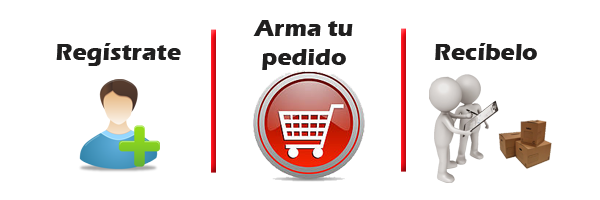
<style>
.page{position:relative;width:600px;height:200px;background:#ffffff}
.page>*{position:absolute;margin:0}
.t1{font:24px "ErasITC-Bold";color:#201f1f}
</style>
<div class="page">
<p class="t1" style="left:253px;top:20px;width:100px;height:50px;text-align:center">Arma tu<br>pedido</p>
<p class="t1" style="left:56px;top:43px;width:125px;height:23px">Regístrate</p>
<p class="t1" style="left:435px;top:43px;width:102px;height:17px">Recíbelo</p>
</div>
